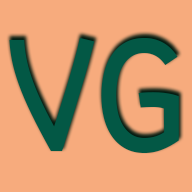
<style>
.page{position:relative;width:192px;height:192px;background:#f7ab7d}
.page>*{position:absolute;margin:0}
.t1{font:163.3px "MainlandPERSONAL-Medium";color:#035845}
</style>
<div class="page">
<p class="t1" style="left:9px;top:38px;width:170px;height:115px">VG</p>
</div>
